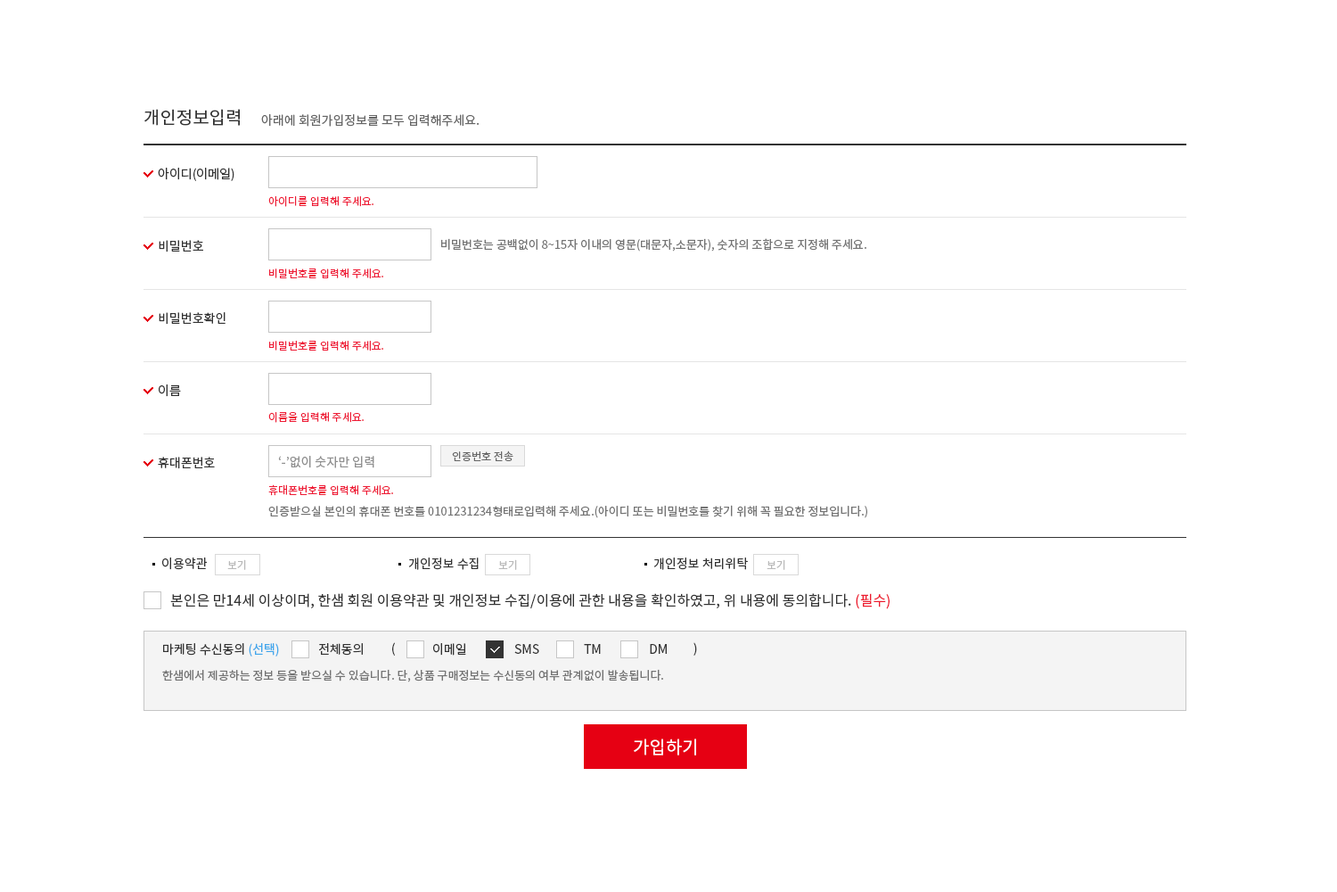
<style>
.page{position:relative;width:1337px;height:892px;background:#ffffff}
.page>*{position:absolute;margin:0}
.t1{font:17.8px "NotoSansKR-Regular";color:#333333}
.t2{font:12.5px "NotoSansKR-Regular";color:#666666}
.t3{font:12.5px "NotoSansKR-Regular";color:#333333}
.t4{font:10.7px "NotoSansKR-Regular";color:#ee1b35}
.t5{font:11.6px "NotoSansKR-Regular";color:#747474}
.t6{font:12.5px "NotoSansKR-Regular";color:#8f8f8f}
.t7{font:10.7px "NotoSansKR-Regular";color:#666666}
.t8{font:10.7px "NotoSansKR-Regular";color:#b9b9b9}
.t9{font:14.3px "NotoSansKR-Regular";color:#333333}
.t10{font:14.3px "NotoSansKR-Regular";color:#ed1b2f}
.t11{font:12.5px "NotoSansKR-Regular";color:#41a7ec}
.t12{font:11.6px "NotoSansKR-Regular";color:#737373}
.t13{font:17.8px "NotoSansKR-Regular";color:#ffffff}
</style>
<div class="page">
<p class="t1" style="left:144px;top:109px;width:96px;height:17px">개인정보입력</p>
<p class="t2" style="left:261px;top:114px;width:219px;height:13px">아래에 회원가입정보를 모두 입력해주세요.</p>
<p class="t3" style="left:158px;top:168px;width:76px;height:13px">아이디(이메일)</p>
<p class="t4" style="left:268px;top:196px;width:106px;height:11px">아이디를 입력해 주세요.</p>
<p class="t3" style="left:159px;top:240px;width:44px;height:12px">비밀번호</p>
<p class="t5" style="left:441px;top:238px;width:426px;height:13px">비밀번호는 공백없이 8~15자 이내의 영문(대문자,소문자), 숫자의 조합으로 지정해 주세요.</p>
<p class="t4" style="left:269px;top:268px;width:114px;height:11px">비밀번호를 입력해 주세요.</p>
<p class="t3" style="left:159px;top:312px;width:67px;height:13px">비밀번호확인</p>
<p class="t4" style="left:269px;top:341px;width:114px;height:10px">비밀번호를 입력해 주세요.</p>
<p class="t3" style="left:159px;top:384px;width:22px;height:13px">이름</p>
<p class="t4" style="left:268px;top:412px;width:96px;height:11px">이름을 입력해 주세요.</p>
<p class="t3" style="left:158px;top:457px;width:57px;height:12px">휴대폰번호</p>
<p class="t6" style="left:278px;top:456px;width:96px;height:12px">‘-’없이 숫자만 입력</p>
<p class="t7" style="left:452px;top:450px;width:62px;height:11px">인증번호 전송</p>
<p class="t4" style="left:268px;top:484px;width:125px;height:12px">휴대폰번호를 입력해 주세요.</p>
<p class="t5" style="left:268px;top:505px;width:600px;height:13px">인증받으실 본인의 휴대폰 번호를 0101231234형태로입력해 주세요.(아이디 또는 비밀번호를 찾기 위해 꼭 필요한 정보입니다.)</p>
<p class="t3" style="left:162px;top:557px;width:46px;height:13px">이용약관</p>
<p class="t3" style="left:408px;top:557px;width:71px;height:13px">개인정보 수집</p>
<p class="t3" style="left:654px;top:557px;width:94px;height:13px">개인정보 처리위탁</p>
<p class="t8" style="left:227px;top:559px;width:19px;height:11px">보기</p>
<p class="t8" style="left:498px;top:559px;width:19px;height:11px">보기</p>
<p class="t8" style="left:767px;top:559px;width:19px;height:11px">보기</p>
<p class="t9" style="left:170px;top:593px;width:720px;height:16px">본인은 만14세 이상이며, 한샘 회원 이용약관 및 개인정보 수집/이용에 관한 내용을 확인하였고, 위 내용에 동의합니다. <span class="t10">(필수)</span></p>
<p class="t3" style="left:392px;top:642px;width:3px;height:13px">(</p>
<p class="t3" style="left:694px;top:642px;width:3px;height:13px">)</p>
<p class="t3" style="left:163px;top:643px;width:116px;height:13px">마케팅 수신동의 <span class="t11">(선택)</span></p>
<p class="t3" style="left:319px;top:643px;width:44px;height:12px">전체동의</p>
<p class="t3" style="left:433px;top:643px;width:234px;height:12px">이메일                 SMS                TM                 DM</p>
<p class="t12" style="left:162px;top:669px;width:501px;height:13px">한샘에서 제공하는 정보 등을 받으실 수 있습니다. 단, 상품 구매정보는 수신동의 여부 관계없이 발송됩니다.</p>
<p class="t13" style="left:634px;top:738px;width:62px;height:17px">가입하기</p>
</div>
